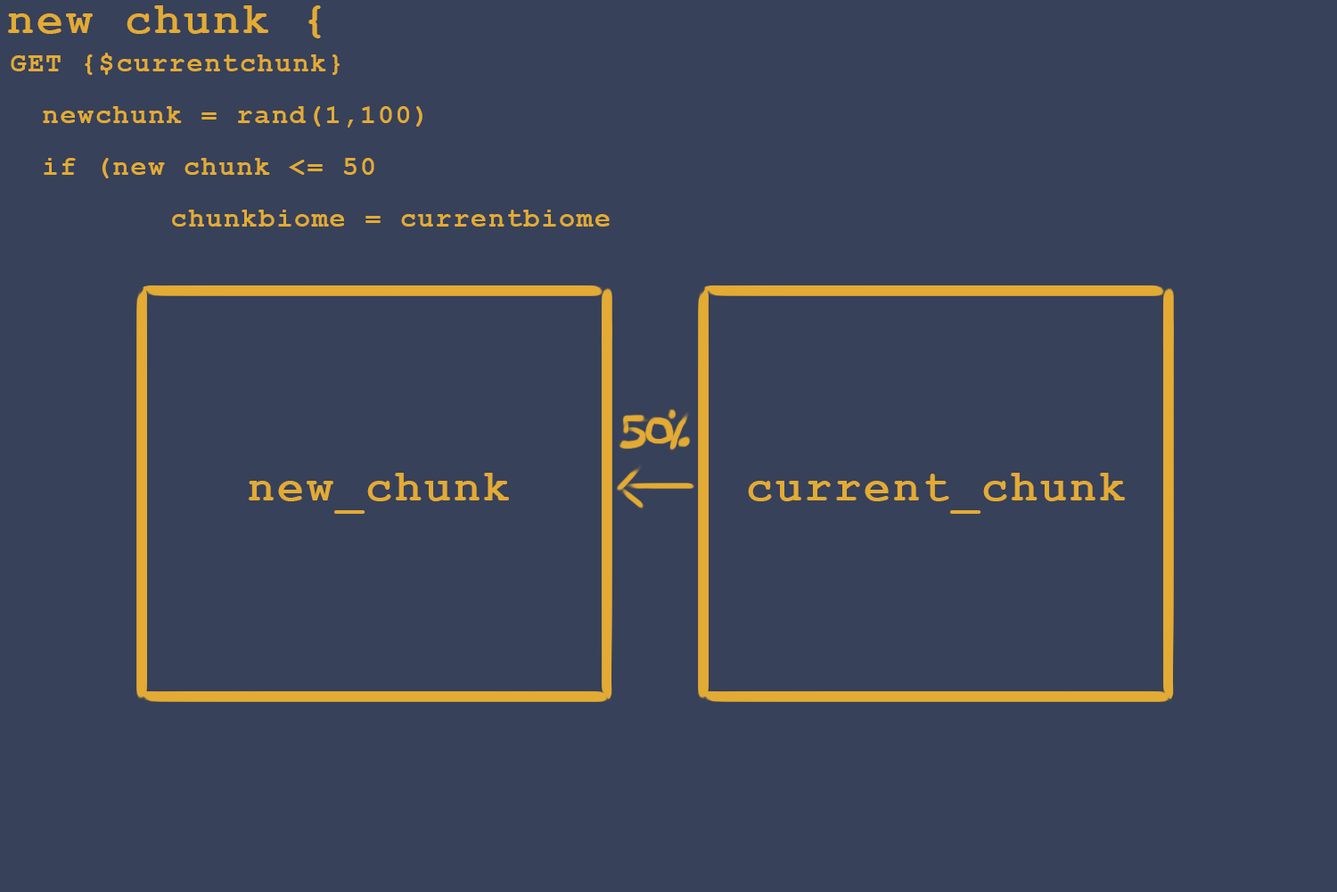
<style>
.page{position:relative;width:1337px;height:892px;background:#374159}
.page>*{position:absolute;margin:0}
.t1{font:44.6px "CourierNewPS-BoldMT";letter-spacing:0.06em;color:#e3ab34}
.t2{font:26.7px/51.7px "CourierNewPS-BoldMT";letter-spacing:0.06em;color:#e3ab34}
.t3{font:26.7px/222.9px "CourierNewPS-BoldMT";letter-spacing:0.06em;color:#e3ab34}
</style>
<div class="page">
<p class="t1" style="left:8px;top:5px;width:313px;height:33px">new chunk {</p>
<p class="t2" style="left:11px;top:53px;width:599px;height:173px"><span class="t3">GET {$currentchunk}</span><br> newchunk = rand(1,100)<br> if (new chunk &lt;= 50<br>     chunkbiome = currentbiome</p>
<p class="t1" style="left:249px;top:473px;width:260px;height:41px">new_chunk</p>
<p class="t1" style="left:748px;top:473px;width:377px;height:41px">current_chunk</p>
</div>
